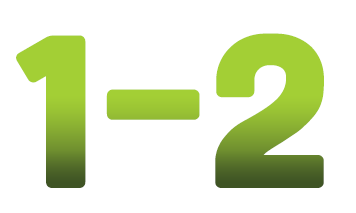
<style>
.page{position:relative;width:356px;height:213px;background:#ffffff}
.page>*{position:absolute;margin:0}
.t1{font:182.7px "TTTogether"}
</style>
<div class="page">
<p class="t1" style="left:16px;top:33px;width:308px;height:155px">1-2</p>
</div>
